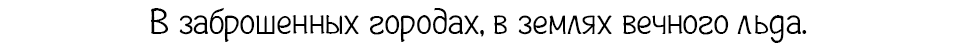
<style>
.page{position:relative;width:958px;height:49px;background:#ffffff}
.page>*{position:absolute;margin:0}
.t1{font:37px "Plainot";color:#000000}
</style>
<div class="page">
<p class="t1" style="left:151px;top:7px;width:656px;height:36px">В заброшенных городах, в землях вечного льда.</p>
</div>
